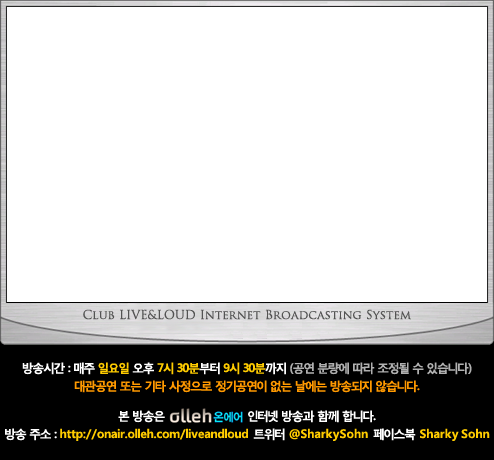
<style>
.page{position:relative;width:494px;height:460px;background:#ffffff}
.page>*{position:absolute;margin:0}
.t1{font:12px/18px "MalgunGothicBold";letter-spacing:-0.05em;color:#ffffff}
.t2{font:12px/18px "MalgunGothicBold";letter-spacing:-0.05em;color:#ffcc00}
.t3{font:12px/18px "MalgunGothicBold";letter-spacing:-0.05em;color:#b0b0b0}
.t4{font:12px/30px "MalgunGothicBold";letter-spacing:-0.05em;color:#ff9900}
.t5{font:12px/18px "MalgunGothicBold";letter-spacing:0.025em;color:#ffcc00}
.t6{font:12px/18px "MalgunGothicBold";letter-spacing:0.05em;color:#ffcc00}
</style>
<div class="page">
<p class="t1" style="left:5px;top:362px;width:485px;height:79px;text-align:center">방송시간 : 매주 <span class="t2">일요일</span> 오후 <span class="t2">7시 30분</span>부터 <span class="t2">9시 30분</span>까지 <span class="t3">(공연 분량에 따라 조정될 수 있습니다)<br></span><span class="t4">대관공연 또는 기타 사정으로 정기공연이 없는 날에는 방송되지 않습니다.<br></span>본 방송은                       인터넷 방송과 함께 합니다.<br>방송 주소 : <span class="t5">http://onair.olleh.com/liveandloud </span>트위터 <span class="t6">@SharkySohn </span>페이스북 <span class="t6">Sharky Sohn</span></p>
</div>
